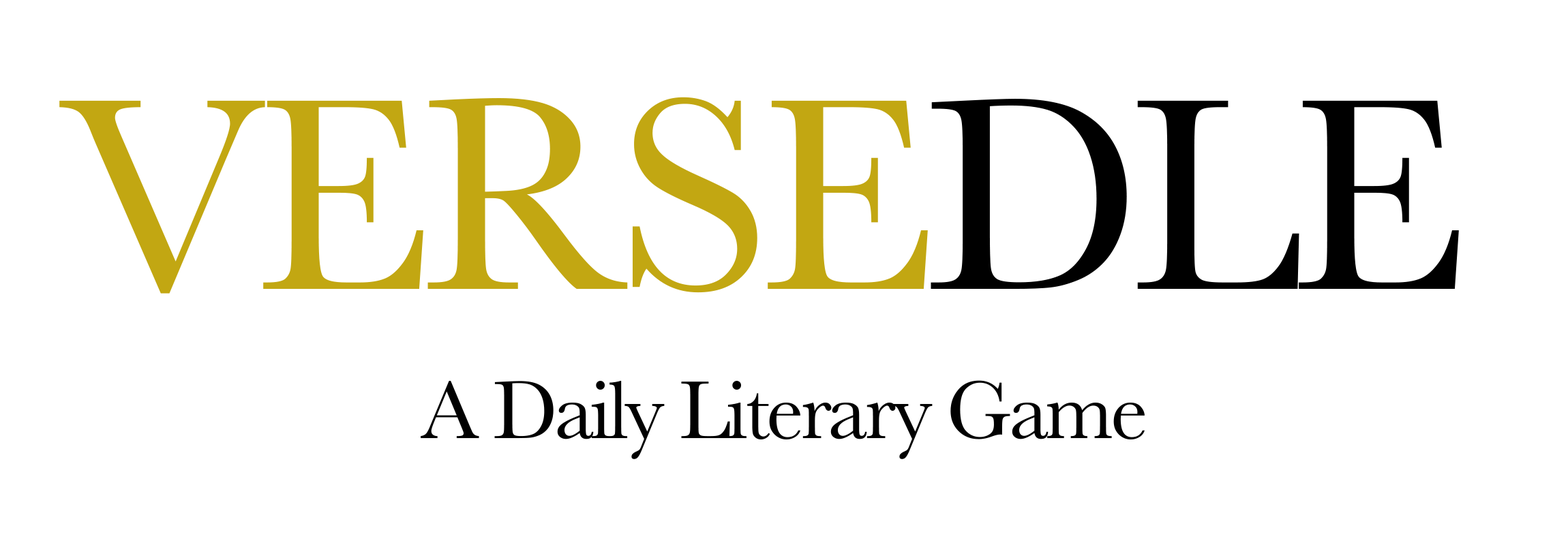
<style>
.page{position:relative;width:1568px;height:545px;background:#ffffff}
.page>*{position:absolute;margin:0}
.t1{font:284.1px "Baskerville";letter-spacing:-0.04em;color:#c2a712}
.t2{font:284.1px "Baskerville";letter-spacing:-0.04em;color:#000000}
.t3{font:85.2px "Baskerville";letter-spacing:-0.04em;color:#010101}
</style>
<div class="page">
<p class="t1" style="left:59px;top:97px;width:1400px;height:197px">VERSE<span class="t2">DLE</span></p>
<p class="t3" style="left:421px;top:380px;width:724px;height:79px">A Daily Literary Game</p>
</div>
